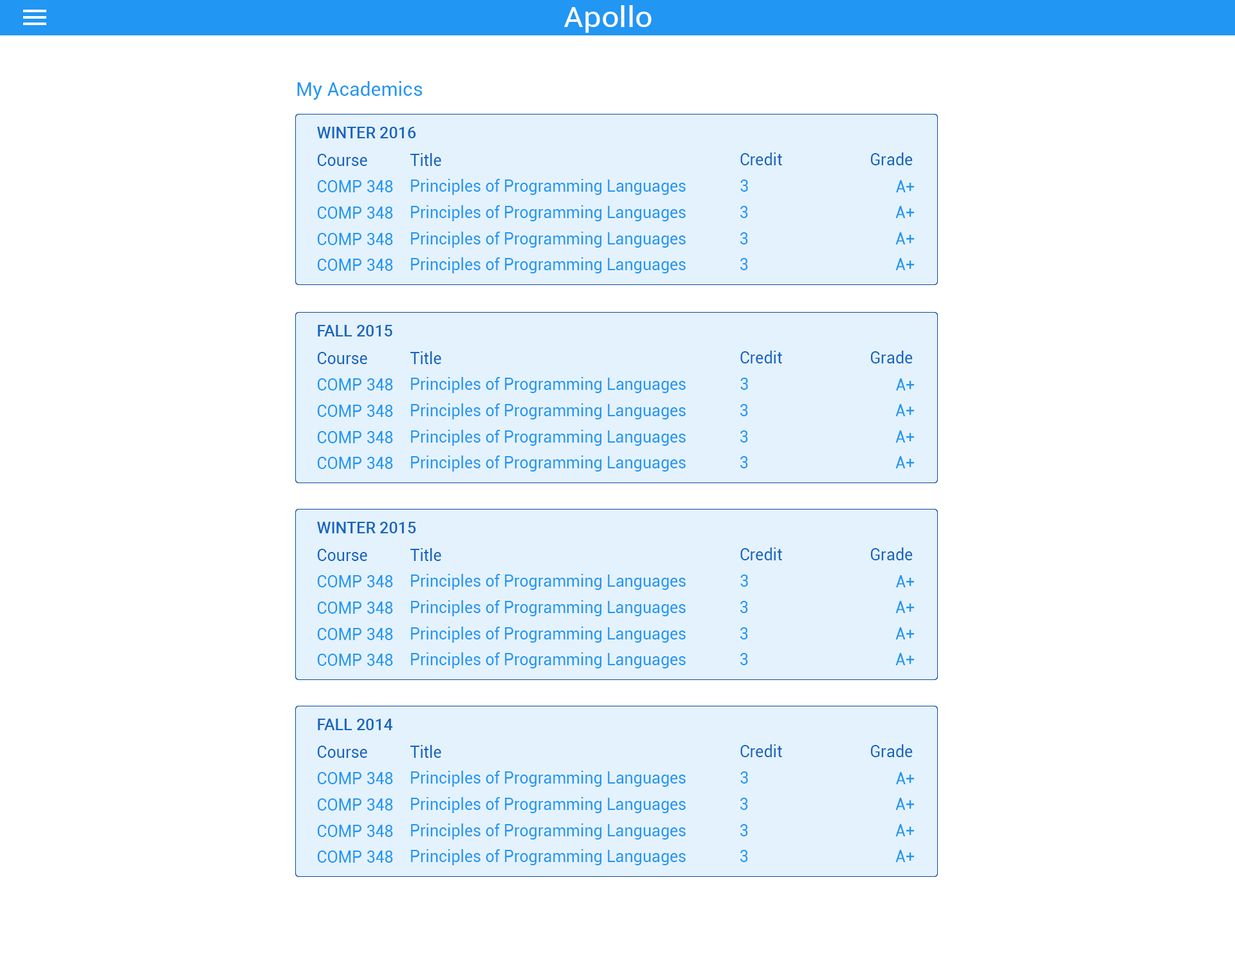
<style>
.page{position:relative;width:1235px;height:965px;background:#ffffff}
.page>*{position:absolute;margin:0}
.t1{font:29px "Roboto-Regular";color:#ffffff;scale:1.08 1}
.t2{font:19.3px "Roboto-Regular";color:#2196f3}
.t3{font:16.1px "Roboto-Medium";color:#1565c0}
.t4{font:16.1px "Roboto-Regular";color:#1565c0}
.t5{font:16.1px "Roboto-Regular";color:#2196f3}
</style>
<div class="page">
<p class="t1" style="left:564px;top:5px;width:88px;height:28px">Apollo</p>
<p class="t2" style="left:297px;top:81px;width:126px;height:19px">My Academics</p>
<p class="t3" style="left:317px;top:127px;width:99px;height:11px">WINTER 2016</p>
<p class="t4" style="left:317px;top:154px;width:50px;height:12px">Course</p>
<p class="t4" style="left:411px;top:153px;width:30px;height:13px">Title</p>
<p class="t4" style="left:741px;top:152px;width:41px;height:13px">Credit</p>
<p class="t4" style="left:871px;top:152px;width:42px;height:13px">Grade</p>
<p class="t5" style="left:317px;top:180px;width:76px;height:12px">COMP 348</p>
<p class="t5" style="left:411px;top:179px;width:275px;height:16px">Principles of Programming Languages</p>
<p class="t5" style="left:741px;top:180px;width:7px;height:12px">3</p>
<p class="t5" style="left:896px;top:180px;width:19px;height:12px">A+</p>
<p class="t5" style="left:317px;top:207px;width:76px;height:12px">COMP 348</p>
<p class="t5" style="left:411px;top:205px;width:275px;height:16px">Principles of Programming Languages</p>
<p class="t5" style="left:741px;top:206px;width:7px;height:12px">3</p>
<p class="t5" style="left:896px;top:206px;width:19px;height:12px">A+</p>
<p class="t5" style="left:317px;top:233px;width:76px;height:12px">COMP 348</p>
<p class="t5" style="left:411px;top:232px;width:275px;height:16px">Principles of Programming Languages</p>
<p class="t5" style="left:741px;top:232px;width:7px;height:13px">3</p>
<p class="t5" style="left:896px;top:232px;width:19px;height:13px">A+</p>
<p class="t5" style="left:411px;top:257px;width:275px;height:16px">Principles of Programming Languages</p>
<p class="t5" style="left:317px;top:259px;width:76px;height:12px">COMP 348</p>
<p class="t5" style="left:741px;top:258px;width:7px;height:12px">3</p>
<p class="t5" style="left:896px;top:258px;width:19px;height:12px">A+</p>
<p class="t3" style="left:318px;top:325px;width:75px;height:12px">FALL 2015</p>
<p class="t4" style="left:317px;top:352px;width:50px;height:12px">Course</p>
<p class="t4" style="left:411px;top:351px;width:30px;height:13px">Title</p>
<p class="t4" style="left:741px;top:351px;width:41px;height:13px">Credit</p>
<p class="t4" style="left:871px;top:351px;width:42px;height:13px">Grade</p>
<p class="t5" style="left:411px;top:377px;width:275px;height:16px">Principles of Programming Languages</p>
<p class="t5" style="left:741px;top:378px;width:7px;height:12px">3</p>
<p class="t5" style="left:317px;top:378px;width:76px;height:13px">COMP 348</p>
<p class="t5" style="left:896px;top:378px;width:19px;height:13px">A+</p>
<p class="t5" style="left:317px;top:405px;width:76px;height:12px">COMP 348</p>
<p class="t5" style="left:411px;top:403px;width:275px;height:17px">Principles of Programming Languages</p>
<p class="t5" style="left:741px;top:404px;width:7px;height:12px">3</p>
<p class="t5" style="left:896px;top:404px;width:19px;height:12px">A+</p>
<p class="t5" style="left:317px;top:431px;width:76px;height:12px">COMP 348</p>
<p class="t5" style="left:411px;top:430px;width:275px;height:16px">Principles of Programming Languages</p>
<p class="t5" style="left:741px;top:430px;width:7px;height:13px">3</p>
<p class="t5" style="left:896px;top:430px;width:19px;height:13px">A+</p>
<p class="t5" style="left:317px;top:457px;width:76px;height:12px">COMP 348</p>
<p class="t5" style="left:411px;top:456px;width:275px;height:16px">Principles of Programming Languages</p>
<p class="t5" style="left:741px;top:456px;width:7px;height:12px">3</p>
<p class="t5" style="left:896px;top:456px;width:19px;height:12px">A+</p>
<p class="t3" style="left:317px;top:522px;width:99px;height:11px">WINTER 2015</p>
<p class="t4" style="left:317px;top:549px;width:50px;height:12px">Course</p>
<p class="t4" style="left:411px;top:548px;width:30px;height:13px">Title</p>
<p class="t4" style="left:741px;top:548px;width:41px;height:12px">Credit</p>
<p class="t4" style="left:871px;top:548px;width:42px;height:12px">Grade</p>
<p class="t5" style="left:317px;top:575px;width:76px;height:12px">COMP 348</p>
<p class="t5" style="left:411px;top:574px;width:275px;height:16px">Principles of Programming Languages</p>
<p class="t5" style="left:741px;top:575px;width:7px;height:12px">3</p>
<p class="t5" style="left:896px;top:575px;width:19px;height:12px">A+</p>
<p class="t5" style="left:317px;top:602px;width:76px;height:12px">COMP 348</p>
<p class="t5" style="left:411px;top:600px;width:275px;height:16px">Principles of Programming Languages</p>
<p class="t5" style="left:741px;top:601px;width:7px;height:12px">3</p>
<p class="t5" style="left:896px;top:601px;width:19px;height:12px">A+</p>
<p class="t5" style="left:317px;top:628px;width:76px;height:12px">COMP 348</p>
<p class="t5" style="left:411px;top:627px;width:275px;height:16px">Principles of Programming Languages</p>
<p class="t5" style="left:741px;top:627px;width:7px;height:13px">3</p>
<p class="t5" style="left:896px;top:627px;width:19px;height:13px">A+</p>
<p class="t5" style="left:317px;top:654px;width:76px;height:12px">COMP 348</p>
<p class="t5" style="left:411px;top:652px;width:275px;height:17px">Principles of Programming Languages</p>
<p class="t5" style="left:741px;top:653px;width:7px;height:12px">3</p>
<p class="t5" style="left:896px;top:653px;width:19px;height:12px">A+</p>
<p class="t3" style="left:318px;top:719px;width:75px;height:11px">FALL 2014</p>
<p class="t4" style="left:317px;top:746px;width:50px;height:12px">Course</p>
<p class="t4" style="left:411px;top:745px;width:30px;height:13px">Title</p>
<p class="t4" style="left:741px;top:744px;width:41px;height:13px">Credit</p>
<p class="t4" style="left:871px;top:744px;width:42px;height:13px">Grade</p>
<p class="t5" style="left:317px;top:772px;width:76px;height:12px">COMP 348</p>
<p class="t5" style="left:411px;top:771px;width:275px;height:16px">Principles of Programming Languages</p>
<p class="t5" style="left:741px;top:772px;width:7px;height:12px">3</p>
<p class="t5" style="left:896px;top:772px;width:19px;height:12px">A+</p>
<p class="t5" style="left:411px;top:797px;width:275px;height:16px">Principles of Programming Languages</p>
<p class="t5" style="left:741px;top:798px;width:7px;height:12px">3</p>
<p class="t5" style="left:896px;top:798px;width:19px;height:12px">A+</p>
<p class="t5" style="left:317px;top:799px;width:76px;height:12px">COMP 348</p>
<p class="t5" style="left:317px;top:825px;width:76px;height:12px">COMP 348</p>
<p class="t5" style="left:411px;top:824px;width:275px;height:16px">Principles of Programming Languages</p>
<p class="t5" style="left:741px;top:824px;width:7px;height:12px">3</p>
<p class="t5" style="left:896px;top:824px;width:19px;height:12px">A+</p>
<p class="t5" style="left:317px;top:851px;width:76px;height:12px">COMP 348</p>
<p class="t5" style="left:411px;top:849px;width:275px;height:16px">Principles of Programming Languages</p>
<p class="t5" style="left:741px;top:850px;width:7px;height:12px">3</p>
<p class="t5" style="left:896px;top:850px;width:19px;height:12px">A+</p>
</div>
